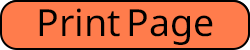
<style>
.page{position:relative;width:250px;height:50px;background:#ff7c4c}
.page>*{position:absolute;margin:0}
.t1{font:37.5px "SansSerifCollection";color:#000000}
</style>
<div class="page">
<p class="t1" style="left:39px;top:8px;width:174px;height:37px">Print Page</p>
</div>
